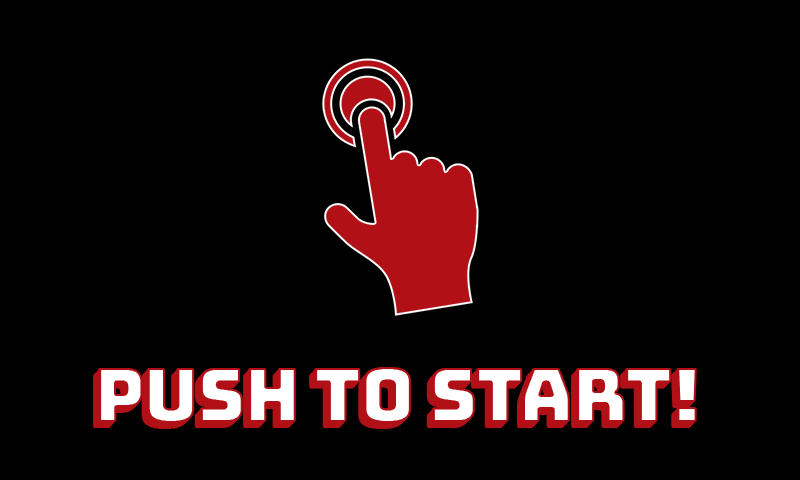
<style>
.page{position:relative;width:800px;height:480px;background:#000000}
.page>*{position:absolute;margin:0}
.t1{font:75px "Bungee-Regular";letter-spacing:-0.025em}
.t2{font:75px "Bungee-Regular";letter-spacing:-0.025em;color:#ffffff}
</style>
<div class="page">
<p class="t1" style="left:93px;top:373px;width:598px;height:56px">Push To Start!</p>
<p class="t1" style="left:94px;top:372px;width:598px;height:56px">Push To Start!</p>
<p class="t1" style="left:95px;top:371px;width:598px;height:56px">Push To Start!</p>
<p class="t1" style="left:96px;top:370px;width:598px;height:56px">Push To Start!</p>
<p class="t2" style="left:97px;top:369px;width:598px;height:56px">Push To Start!</p>
<p class="t2" style="left:98px;top:367px;width:598px;height:56px">Push To Start!</p>
<p class="t2" style="left:99px;top:367px;width:598px;height:56px">Push To Start!</p>
</div>
